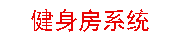
<style>
.page{position:relative;width:190px;height:38px;background:#ffffff}
.page>*{position:absolute;margin:0}
.t1{font:24px "SimHei";color:#e80505}
</style>
<div class="page">
<p class="t1" style="left:31px;top:9px;width:118px;height:23px">健身房系统</p>
</div>
